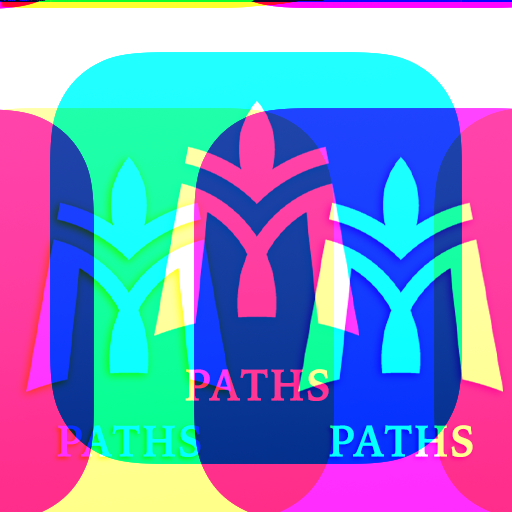
<style>
.page{position:relative;width:512px;height:512px}
.page>*{position:absolute;margin:0}
.t1{font:44px "IowanOldStyle-Bold";letter-spacing:0.025em;text-transform:uppercase;font-weight:bold;scale:0.91 1}
</style>
<div class="page">
<p class="t1" style="left:185px;top:367px;width:144px;height:32px">paths</p>
</div>
